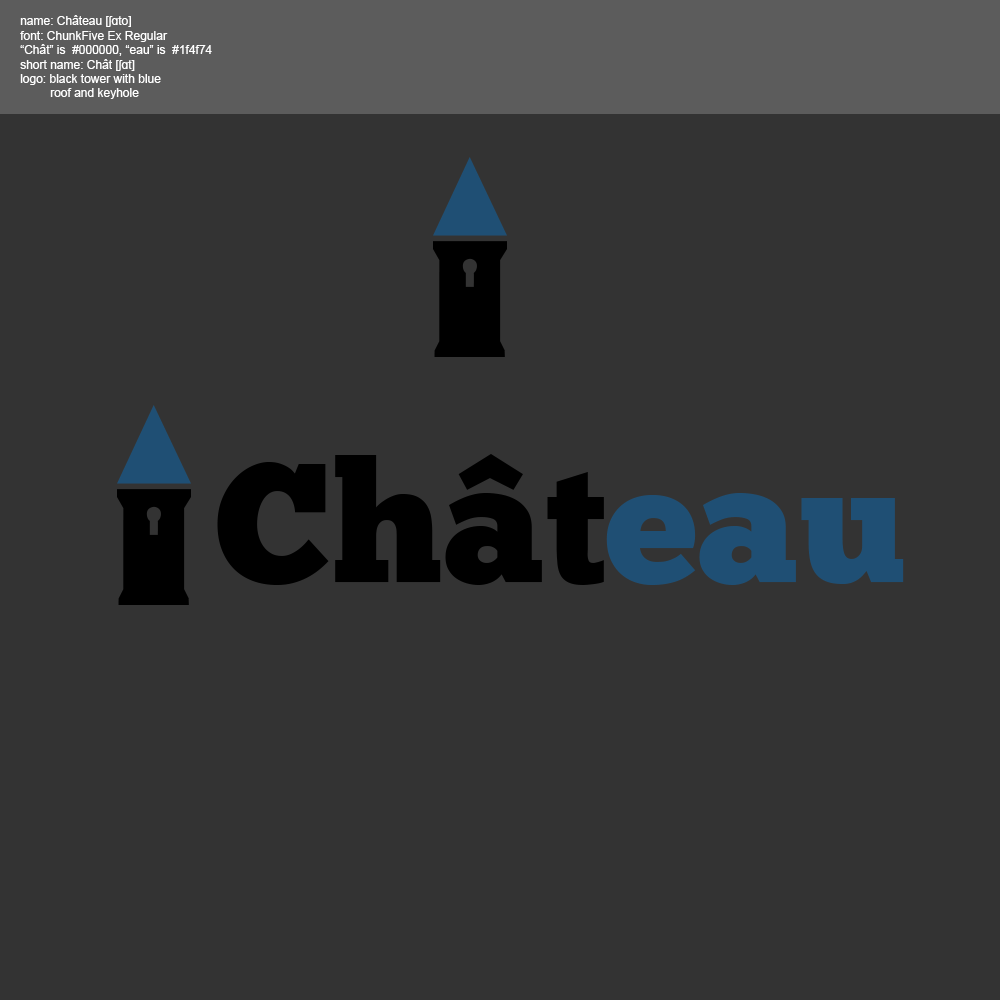
<style>
.page{position:relative;width:1000px;height:1000px;background:#333333}
.page>*{position:absolute;margin:0}
.t1{font:12px "ArialMT";color:#ffffff}
.t2{font:169px "ChunkFiveEx";color:#000000}
.t3{font:169px "ChunkFiveEx";color:#1f4f74}
</style>
<div class="page">
<p class="t1" style="left:20px;top:15px;width:192px;height:84px">name: Château [ʃɑto]<br>font: ChunkFive Ex Regular<br>“Chât” is  #000000, “eau” is  #1f4f74<br>short name: Chât [ʃɑt]<br>logo: black tower with blue <br>         roof and keyhole</p>
<p class="t2" style="left:217px;top:454px;width:687px;height:131px">Chât<span class="t3">eau</span></p>
</div>
